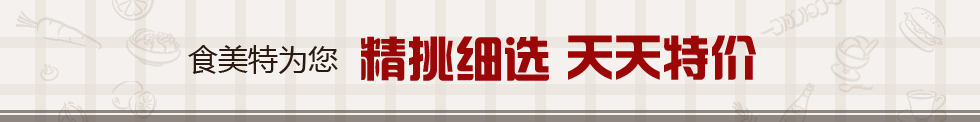
<style>
.page{position:relative;width:980px;height:122px;background:#f5f1ee}
.page>*{position:absolute;margin:0}
.t1{font:48px "hzgb";color:#9b0606}
.t2{font:30px "MicrosoftYaHei";color:#2b1a12}
</style>
<div class="page">
<p class="t1" style="left:361px;top:36px;width:188px;height:45px">精挑细选</p>
<p class="t1" style="left:568px;top:35px;width:188px;height:45px">天天特价</p>
<p class="t2" style="left:188px;top:45px;width:150px;height:29px">食美特为您</p>
</div>
